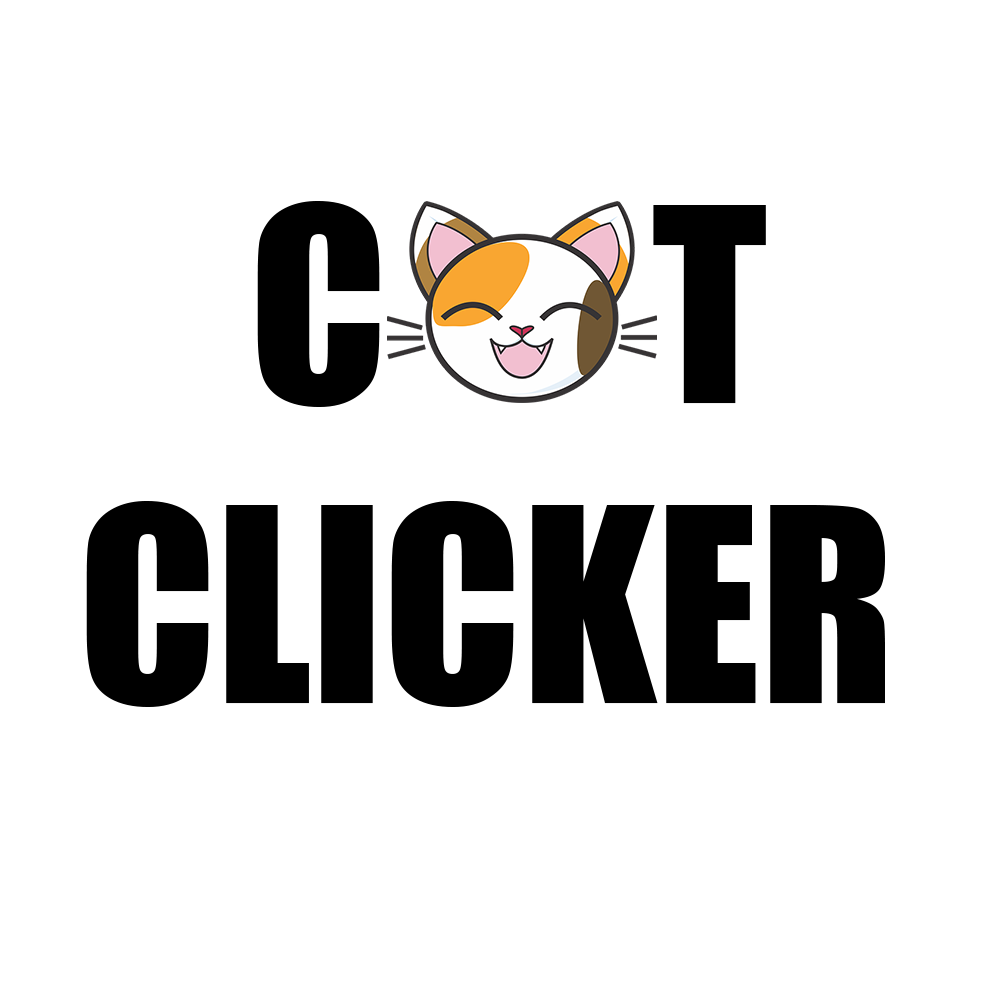
<style>
.page{position:relative;width:1000px;height:1000px;background:#ffffff}
.page>*{position:absolute;margin:0}
.t1{font:250px "Impact";color:#000000}
</style>
<div class="page">
<p class="t1" style="left:86px;top:201px;width:799px;height:506px;text-align:center">C      T<br>CLICKER</p>
</div>
